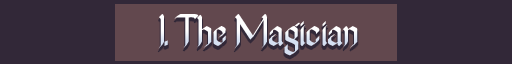
<style>
.page{position:relative;width:512px;height:64px;background:#322838}
.page>*{position:absolute;margin:0}
.t1{font:40px "TheNovice";letter-spacing:-0.05em}
</style>
<div class="page">
<p class="t1" style="left:158px;top:14px;width:200px;height:42px">I. The Magician</p>
</div>
